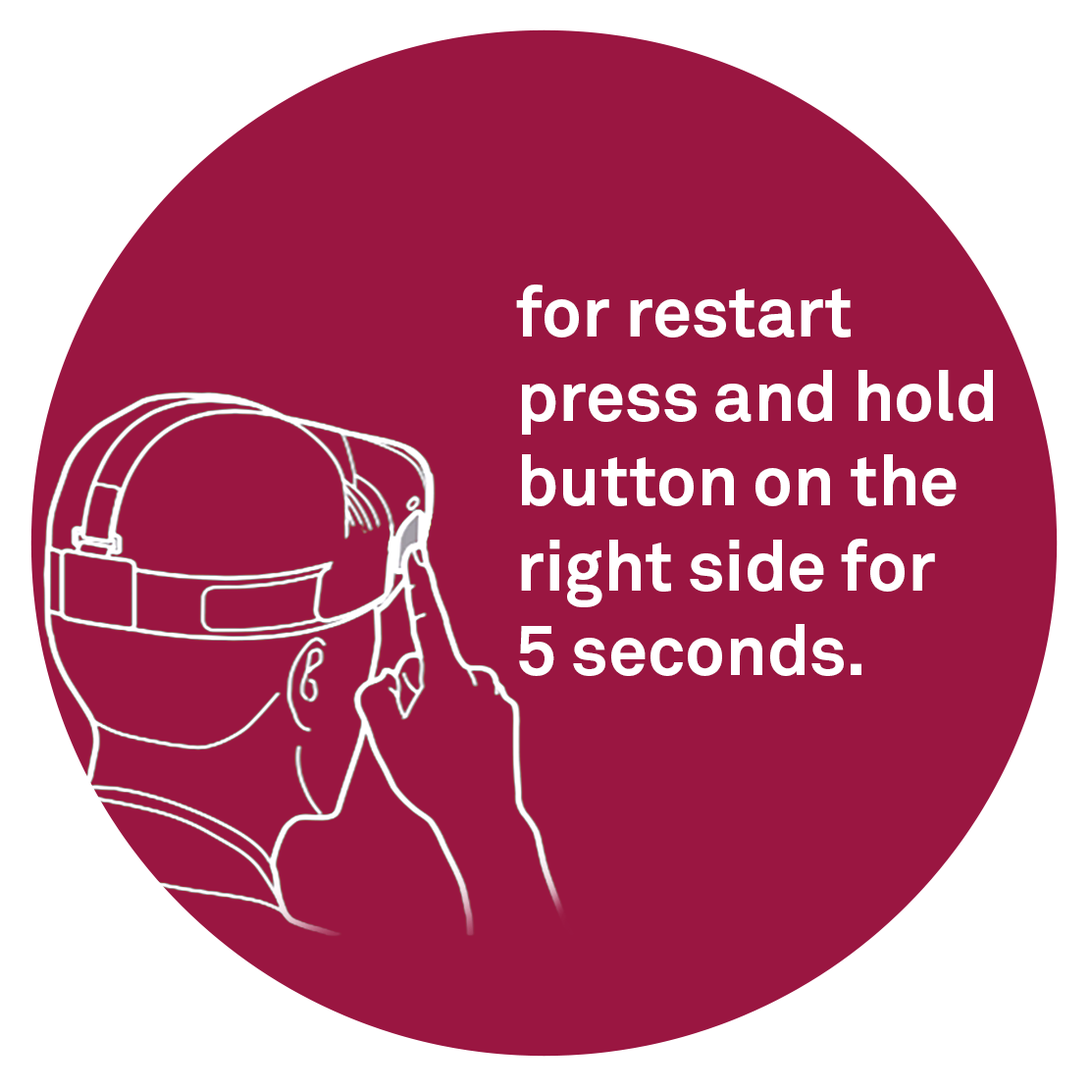
<style>
.page{position:relative;width:1092px;height:1091px;background:#9a1641}
.page>*{position:absolute;margin:0}
.t1{font:70.7px "AkkuratOffice-Bold";color:#ffffff}
</style>
<div class="page">
<p class="t1" style="left:516px;top:285px;width:477px;height:391px">for restart <br>press and hold <br>button on the <br>right side for <br>5 seconds.</p>
</div>
